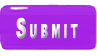
<style>
.page{position:relative;width:97px;height:56px;background:#ffffff}
.page>*{position:absolute;margin:0}
.t1{font:28px "Arial-Black";letter-spacing:0.2em;font-variant:small-caps;font-weight:bold;scale:0.5 1}
</style>
<div class="page">
<p class="t1" style="left:16px;top:17px;width:62px;height:22px">Submit</p>
</div>
